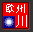
<style>
.page{position:relative;width:33px;height:32px;background:#f20000}
.page>*{position:absolute;margin:0}
.t1{font:10.4px "SimSun";color:#ffffff}
.t2{font:11.7px "SimSun";color:#ffffff}
</style>
<div class="page">
<p class="t1" style="left:6px;top:4px;width:19px;height:9px">欧州</p>
<p class="t2" style="left:16px;top:15px;width:11px;height:12px">川</p>
</div>
